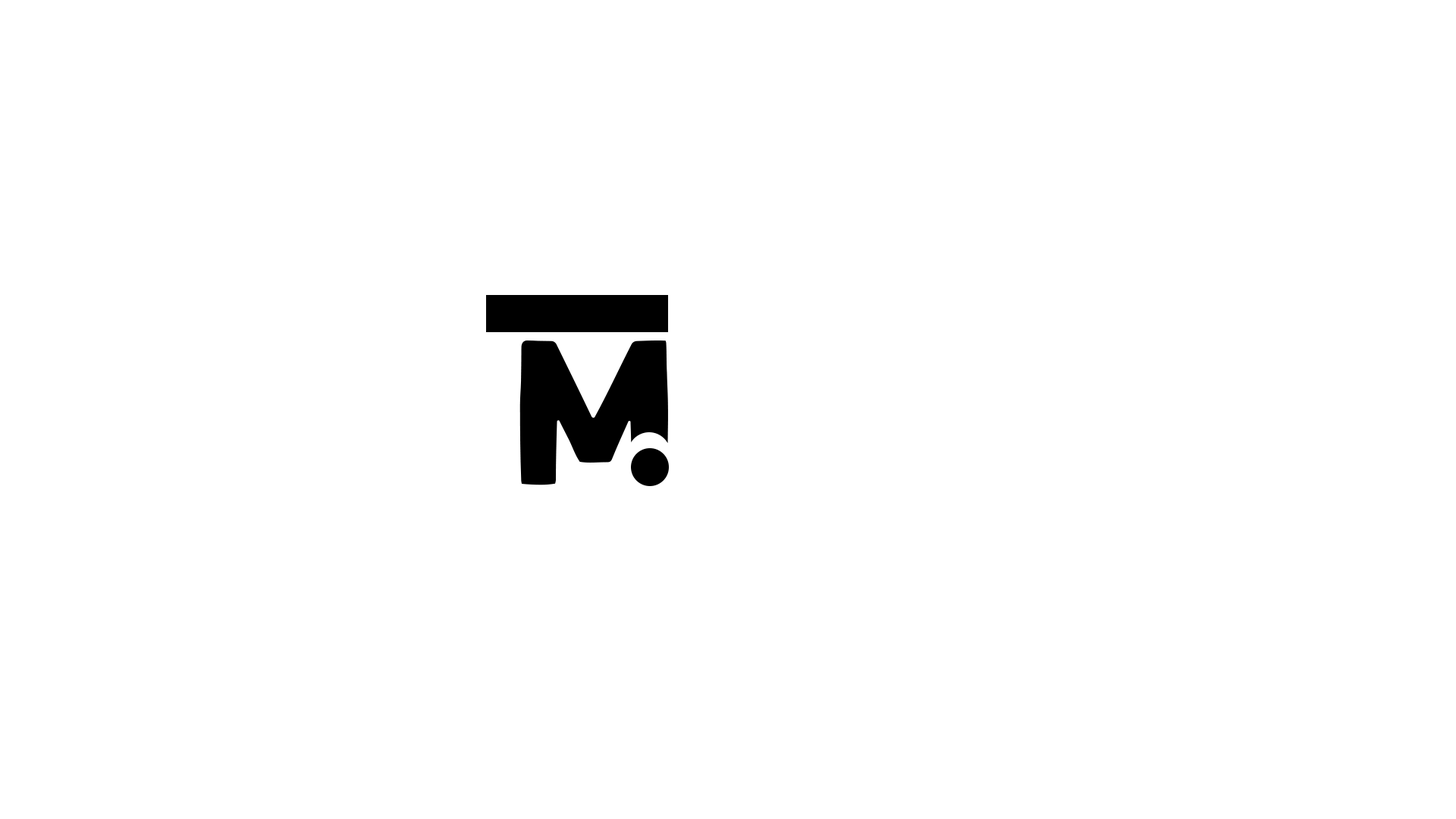
<style>
.page{position:relative;width:1456px;height:819px;background:#ffffff}
.page>*{position:absolute;margin:0}
.t1{font:193.2px "RoquenDEMO";color:#000000}
</style>
<div class="page">
<p class="t1" style="left:519px;top:340px;width:149px;height:145px">M</p>
</div>
